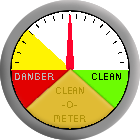
<style>
.page{position:relative;width:140px;height:140px;background:#ffffff}
.page>*{position:absolute;margin:0}
.t1{font:12px "rainyhearts";color:#bab9b9}
.t2{font:12px "rainyhearts";color:#000000}
.t3{font:11.5px "rainyhearts";color:#b19208}
</style>
<div class="page">
<p class="t1" style="left:15px;top:73px;width:39px;height:7px">DANGER</p>
<p class="t2" style="left:92px;top:73px;width:29px;height:7px">CLEAN</p>
<p class="t3" style="left:54px;top:87px;width:32px;height:35px;text-align:center">CLEAN<br>-O-<br>METER</p>
</div>
